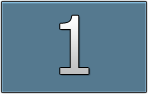
<style>
.page{position:relative;width:148px;height:94px;background:#55798f}
.page>*{position:absolute;margin:0}
.t1{font:80px "Tahoma"}
</style>
<div class="page">
<p class="t1" style="left:60px;top:15px;width:29px;height:59px">1</p>
</div>
